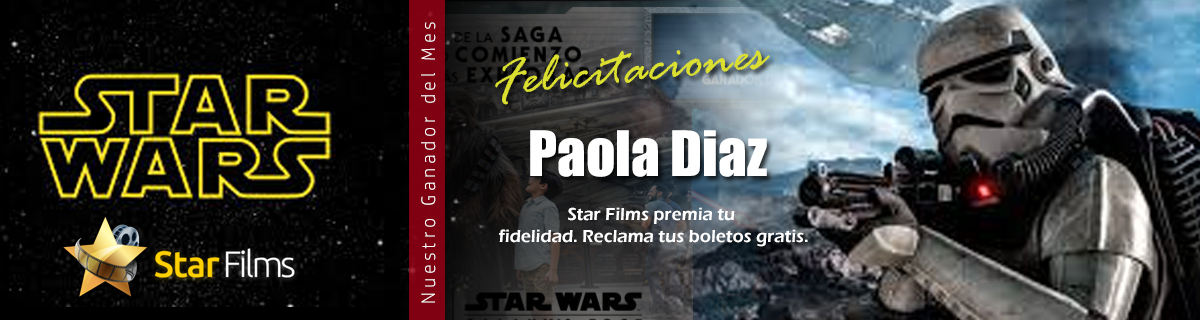
<style>
.page{position:relative;width:1200px;height:320px}
.page>*{position:absolute;margin:0}
.t1{font:19.6px "HPSimplified-Light";letter-spacing:0.2em;color:#ffffff}
.t2{font:56.6px "RageItalic";color:#dbdf30}
.t3{font:57.7px "Impact";color:#ffffff}
.t4{font:18px "ErasITC-Demi";color:#ffffff}
</style>
<div class="page">
<p class="t1" style="left:421px;top:22px;width:15px;height:281px;rotate:-90deg">Nuestro Ganador del Mes</p>
<p class="t2" style="left:495px;top:50px;width:275px;height:55px;rotate:-6deg">Felicitaciones</p>
<p class="t3" style="left:530px;top:130px;width:237px;height:47px">Paola Diaz</p>
<p class="t4" style="left:499px;top:207px;width:309px;height:40px;text-align:center">Star Films premia tu <br>fidelidad. Reclama tus boletos gratis.</p>
</div>
